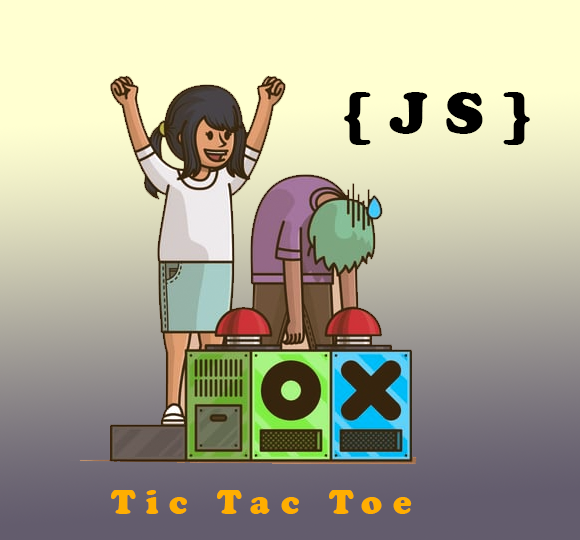
<style>
.page{position:relative;width:580px;height:540px}
.page>*{position:absolute;margin:0}
.t1{font:60px "CooperBlack";letter-spacing:0.3em;color:#000000}
.t2{font:35px "CooperBlack";letter-spacing:0.3em;color:#ffae00}
</style>
<div class="page">
<p class="t1" style="left:344px;top:92px;width:186px;height:53px">{JS}</p>
<p class="t2" style="left:111px;top:490px;width:301px;height:24px">Tic Tac Toe</p>
</div>
